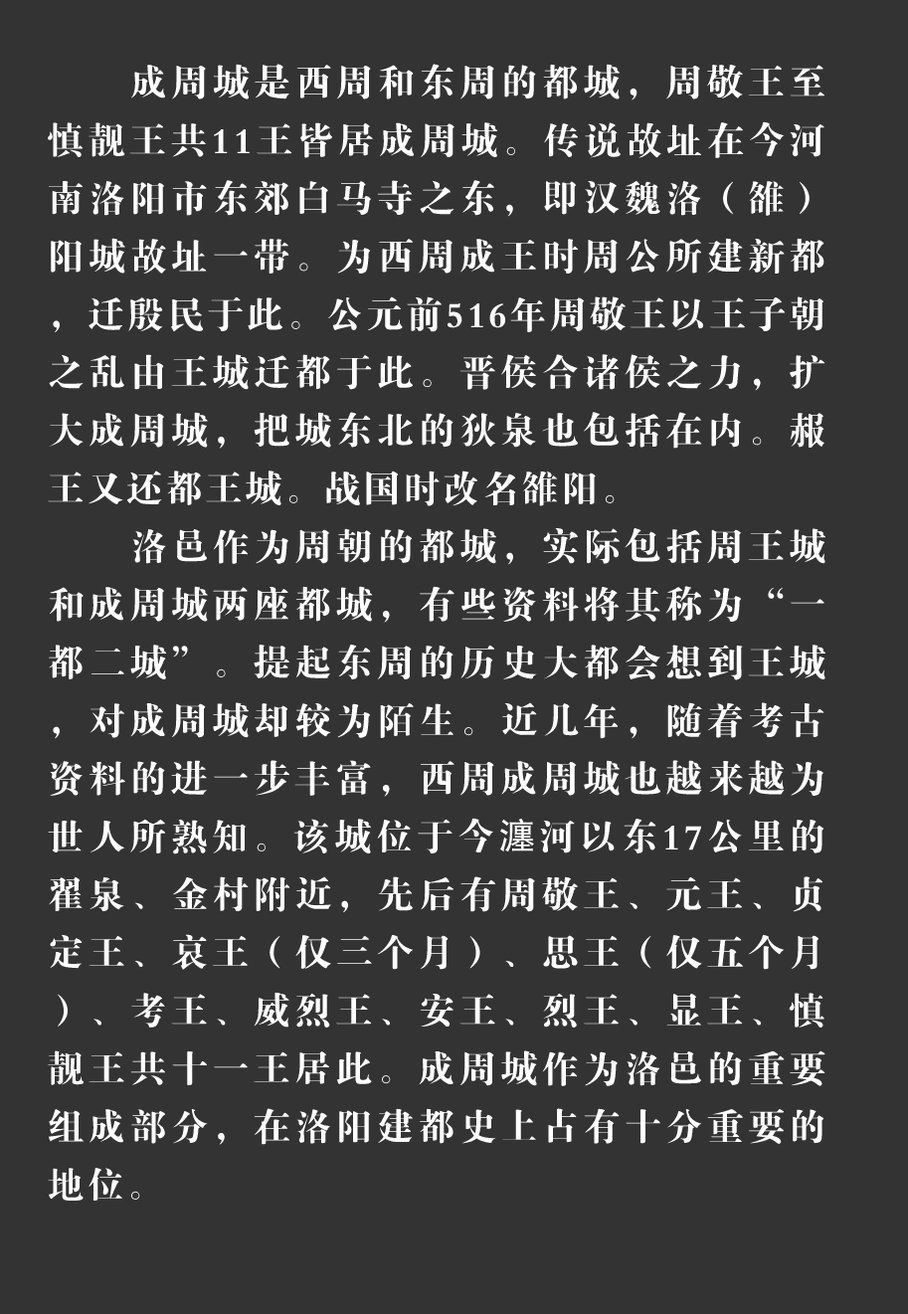
<style>
.page{position:relative;width:908px;height:1314px;background:#333333}
.page>*{position:absolute;margin:0}
.t1{font:37.3px/58px "FZDBSK--GBK1-0";letter-spacing:0.06em;color:#ffffff}
.t2{font:37.3px/58px "AdobeHeitiStd-Regular";letter-spacing:0.06em;color:#ffffff}
</style>
<div class="page">
<p class="t1" style="left:48px;top:64px;width:777px;height:1136px;text-align:justify">成周城是西周和东周的都城，周敬王至慎靓王共11王皆居成周城。传说故址在今河南洛阳市东郊白马寺之东，即汉魏洛（雒）阳城故址一带。为西周成王时周公所建新都，迁殷民于此。公元前516年周敬王以王子朝之乱由王城迁都于此。晋侯合诸侯之力，扩大成周城，把城东北的狄泉也包括在内。赧王又还都王城。战国时改名雒阳。<br>洛邑作为周朝的都城，实际包括周王城和成周城两座都城，有些资料将其称为“一都二城”。提起东周的历史大都会想到王城，对成周城却较为陌生。近几年，随着考古资料的进一步丰富，西周成周城也越来越为世人所熟知。该城位于今<span class="t2">瀍</span>河以东17公里的翟泉、金村附近，先后有周敬王、元王、贞定王、哀王（仅三个月）、思王（仅五个月）、考王、威烈王、安王、烈王、显王、慎靓王共十一王居此。成周城作为洛邑的重要组成部分，在洛阳建都史上占有十分重要的地位。</p>
</div>
